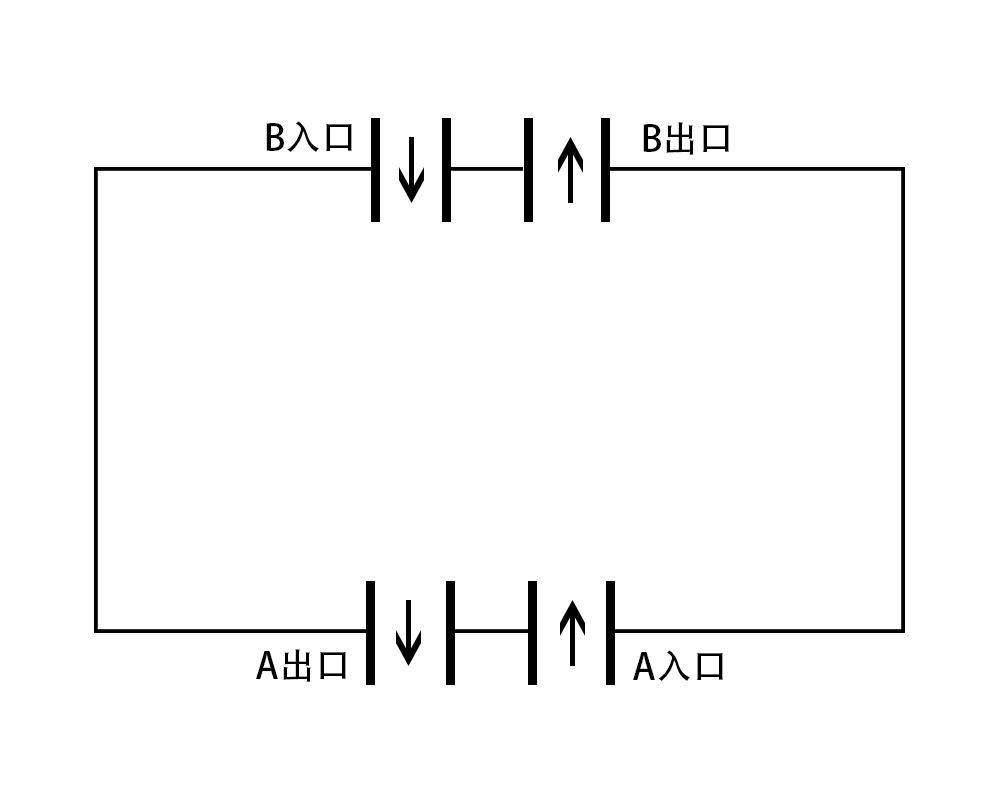
<style>
.page{position:relative;width:1000px;height:800px;background:#ffffff}
.page>*{position:absolute;margin:0}
.t1{font:36px "AdobeHeitiStd-Regular";color:#000000}
</style>
<div class="page">
<p class="t1" style="left:266px;top:121px;width:86px;height:31px">B入口</p>
<p class="t1" style="left:643px;top:122px;width:86px;height:33px">B出口</p>
<p class="t1" style="left:256px;top:649px;width:90px;height:33px">A出口</p>
<p class="t1" style="left:633px;top:650px;width:90px;height:31px">A入口</p>
</div>
